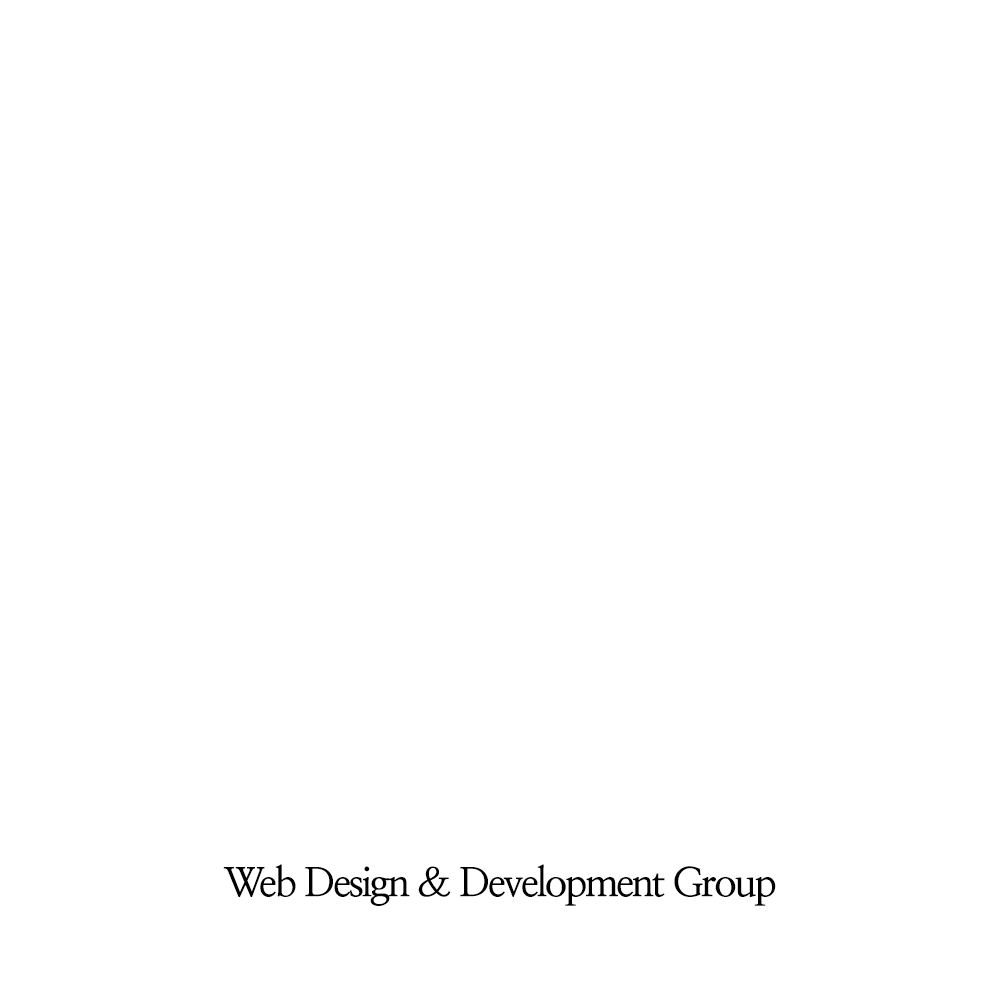
<style>
.page{position:relative;width:1000px;height:1000px;background:#ffffff}
.page>*{position:absolute;margin:0}
.t1{font:40px "NanumMyeongjoBold";letter-spacing:-0.06em;color:#000000}
</style>
<div class="page">
<p class="t1" style="left:223px;top:864px;width:553px;height:42px">Web Design &amp; Development Group</p>
</div>
